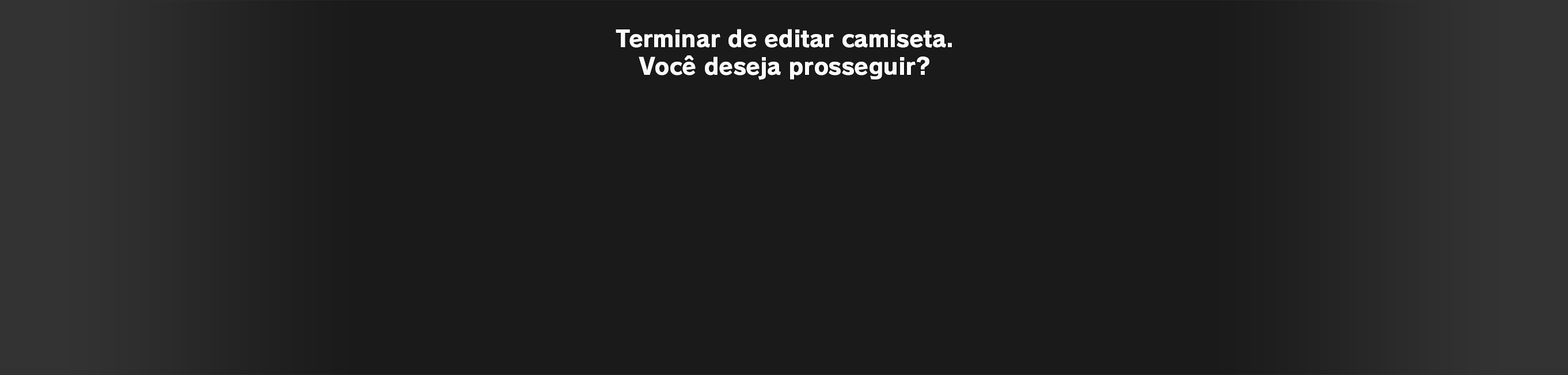
<style>
.page{position:relative;width:1568px;height:375px;background:#1a1a1a}
.page>*{position:absolute;margin:0}
.t1{font:23px "RodinPro-EB";letter-spacing:-0.015em;color:#fbfafb}
</style>
<div class="page">
<p class="t1" style="left:616px;top:29px;width:336px;height:19px">Terminar de editar camiseta.</p>
<p class="t1" style="left:639px;top:55px;width:290px;height:25px">Você deseja prosseguir?</p>
</div>
